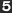
<style>
.page{position:relative;width:12px;height:13px}
.page>*{position:absolute;margin:0}
.t1{font:13.9px "K2D-ExtraBold";color:#ffffff}
</style>
<div class="page">
<p class="t1" style="left:2px;top:1px;width:9px;height:11px">5</p>
</div>
